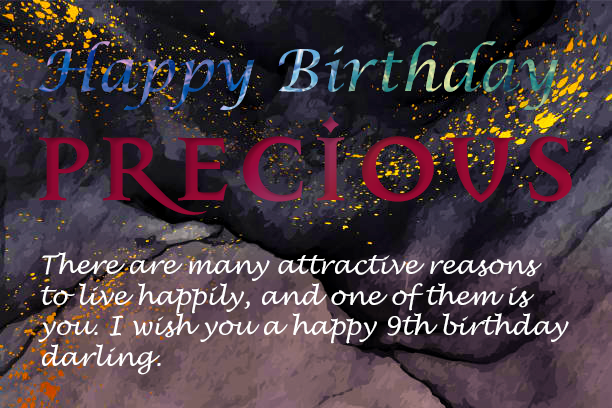
<style>
.page{position:relative;width:612px;height:408px}
.page>*{position:absolute;margin:0}
.t1{font:58.3px "LucidaCalligraphy-Italic"}
.t2{font:100px "Mason-Bold";color:#8e0831}
.t3{font:58.3px "LucidaHandwriting-Italic";color:#8e0831}
.t4{font:25.4px "LucidaHandwriting-Italic";color:#fefefe}
</style>
<div class="page">
<p class="t1" style="left:38px;top:41px;width:520px;height:69px">Happy Birthday</p>
<p class="t2" style="left:39px;top:116px;width:533px;height:99px"><span class="t3"> </span>PRECIOUS</p>
<p class="t4" style="left:38px;top:252px;width:531px;height:123px">There are many attractive reasons to live happily, and one of them is you. I wish you a happy 9th birthday darling.</p>
</div>
